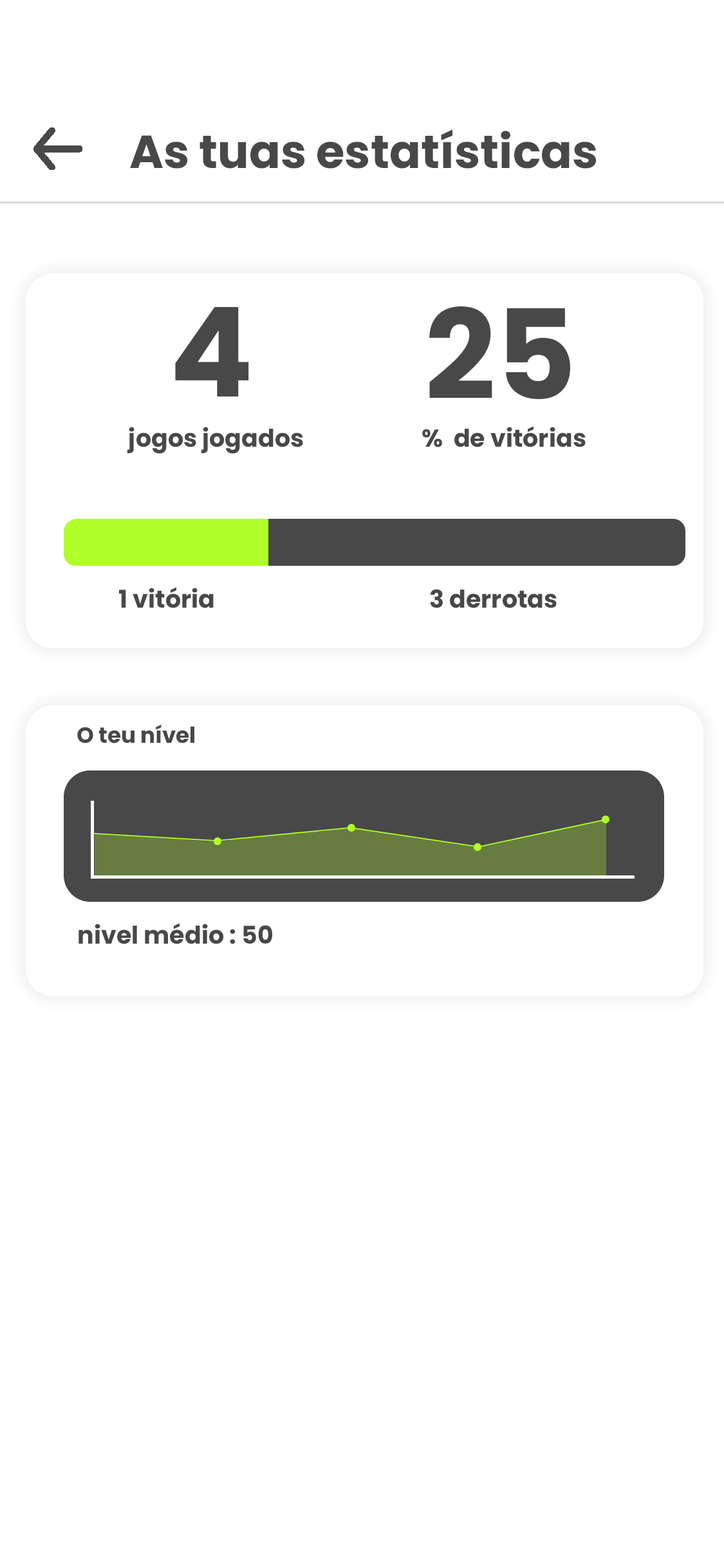
<style>
.page{position:relative;width:724px;height:1568px;background:#ffffff}
.page>*{position:absolute;margin:0}
.t1{font:46.3px "Poppins-Bold";color:#484848}
.t2{font:124.2px "Poppins-Bold";color:#484848}
.t3{font:24.5px "Poppins-Bold";color:#484848}
.t4{font:21.9px "Poppins-Bold";color:#484848}
</style>
<div class="page">
<p class="t1" style="left:130px;top:129px;width:466px;height:40px">As tuas estatísticas</p>
<p class="t2" style="left:175px;top:307px;width:74px;height:90px">4</p>
<p class="t2" style="left:429px;top:306px;width:141px;height:93px">25</p>
<p class="t3" style="left:127px;top:427px;width:176px;height:27px">jogos jogados</p>
<p class="t3" style="left:422px;top:426px;width:164px;height:21px">%  de vitórias</p>
<p class="t3" style="left:119px;top:587px;width:95px;height:21px">1 vitória</p>
<p class="t3" style="left:430px;top:589px;width:127px;height:19px">3 derrotas</p>
<p class="t4" style="left:77px;top:724px;width:117px;height:19px">O teu nível</p>
<p class="t3" style="left:79px;top:923px;width:193px;height:21px">nivel médio : 50</p>
</div>
